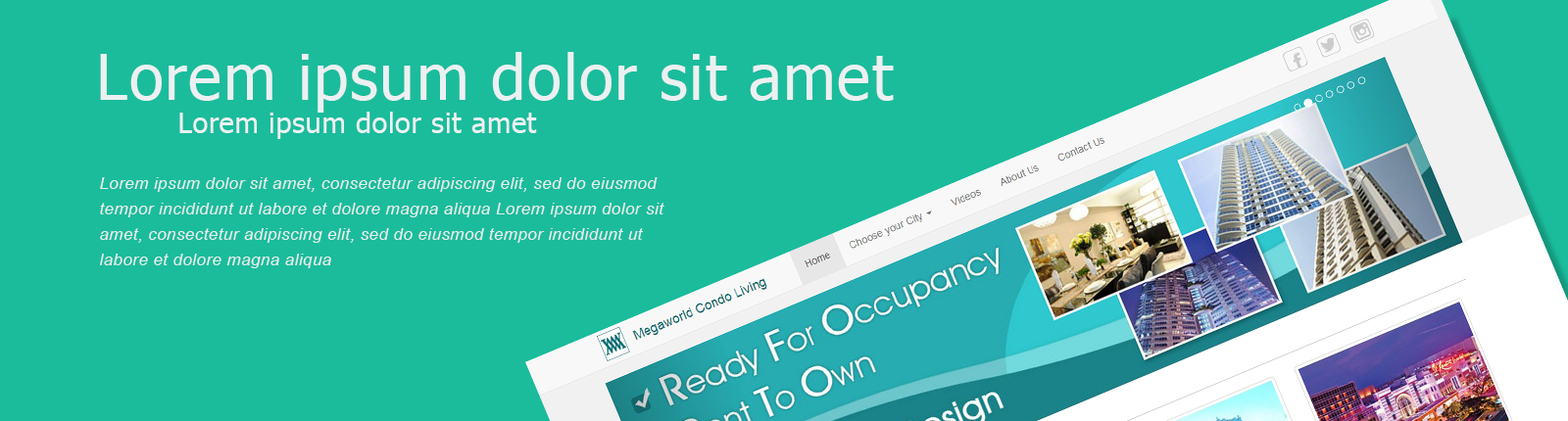
<style>
.page{position:relative;width:1568px;height:421px;background:#1abc9c}
.page>*{position:absolute;margin:0}
.t1{font:62.6px "Tahoma";letter-spacing:0.025em;color:#ecf0f1}
.t2{font:28.2px "Tahoma";letter-spacing:0.025em;color:#ecf0f1}
.t3{font:16.7px/25.5px "Arial-ItalicMT";letter-spacing:0.025em;color:#ecf0f1}
</style>
<div class="page">
<p class="t1" style="left:100px;top:52px;width:794px;height:61px">Lorem ipsum dolor sit amet</p>
<p class="t2" style="left:179px;top:112px;width:358px;height:27px">Lorem ipsum dolor sit amet</p>
<p class="t3" style="left:100px;top:177px;width:564px;height:92px;opacity:0.95">Lorem ipsum dolor sit amet, consectetur adipiscing elit, sed do eiusmod tempor incididunt ut labore et dolore magna aliqua Lorem ipsum dolor sit amet, consectetur adipiscing elit, sed do eiusmod tempor incididunt ut labore et dolore magna aliqua</p>
</div>
